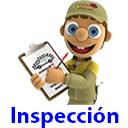
<style>
.page{position:relative;width:128px;height:128px;background:#ffffff}
.page>*{position:absolute;margin:0}
.t1{font:23px "MyriadPro-Bold";color:#0000ff}
</style>
<div class="page">
<p class="t1" style="left:11px;top:107px;width:108px;height:21px">Inspección</p>
</div>
